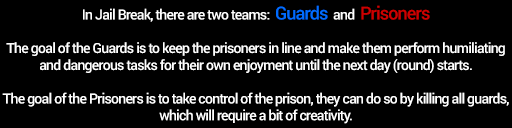
<style>
.page{position:relative;width:512px;height:128px;background:#000000}
.page>*{position:absolute;margin:0}
.t1{font:14px "Roboto-Medium";letter-spacing:-0.05em;color:#ffffff}
.t2{font:18px "Roboto-Medium";letter-spacing:-0.05em;color:#006cff}
.t3{font:18px "Roboto-Medium";letter-spacing:-0.05em;color:#ce0000}
</style>
<div class="page">
<p class="t1" style="left:2px;top:5px;width:507px;height:119px;text-align:center">In Jail Break, there are two teams:  <span class="t2">Guards</span>  and  <span class="t3">Prisoners<br></span><br>The goal of the Guards is to keep the prisoners in line and make them perform humiliating and dangerous tasks for their own enjoyment until the next day (round) starts. <br><br>The goal of the Prisoners is to take control of the prison, they can do so by killing all guards, which will require a bit of creativity.</p>
</div>
